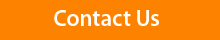
<style>
.page{position:relative;width:220px;height:40px;background:#fc8200}
.page>*{position:absolute;margin:0}
.t1{font:23.3px "MyriadPro-Semibold";color:#ffffff}
</style>
<div class="page">
<p class="t1" style="left:54px;top:10px;width:105px;height:16px">Contact Us</p>
</div>
